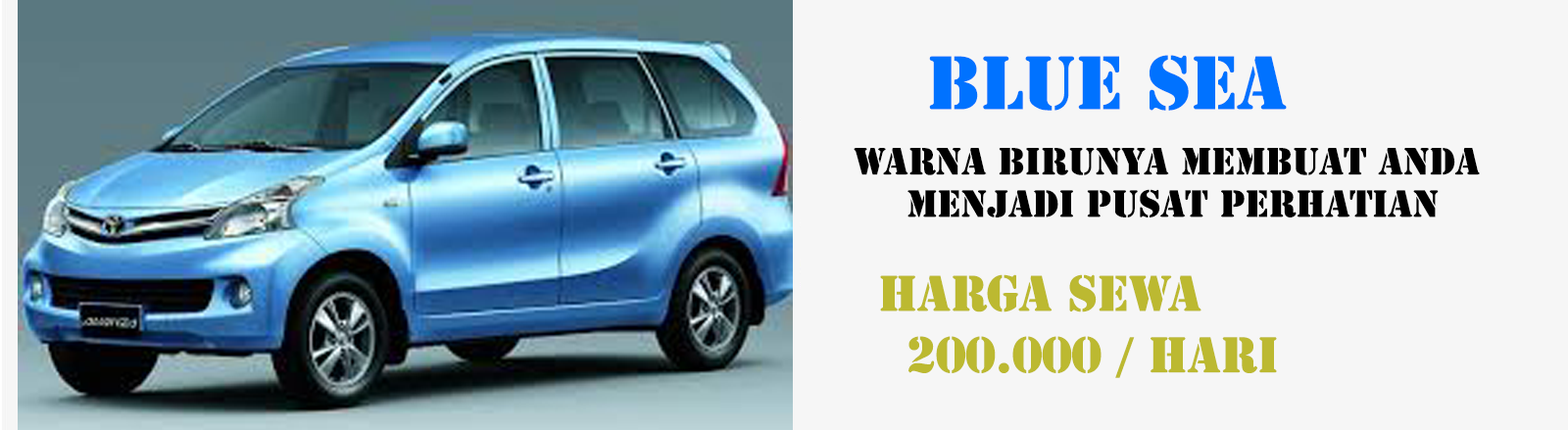
<style>
.page{position:relative;width:1568px;height:430px;background:#f6f6f6}
.page>*{position:absolute;margin:0}
.t1{font:70.6px "StencilStd";color:#0072ff}
.t2{font:35.3px "StencilStd";color:#000000}
.t3{font:47px "StencilStd";color:#bcb931}
</style>
<div class="page">
<p class="t1" style="left:929px;top:55px;width:358px;height:56px">BLUE SEA</p>
<p class="t2" style="left:854px;top:148px;width:626px;height:70px;text-align:center">warna birunya membuat anda <br>menjadi pusat perhatian</p>
<p class="t3" style="left:880px;top:274px;width:321px;height:39px">HARGA SEWA</p>
<p class="t3" style="left:908px;top:336px;width:369px;height:42px">200.000 / hari</p>
</div>
